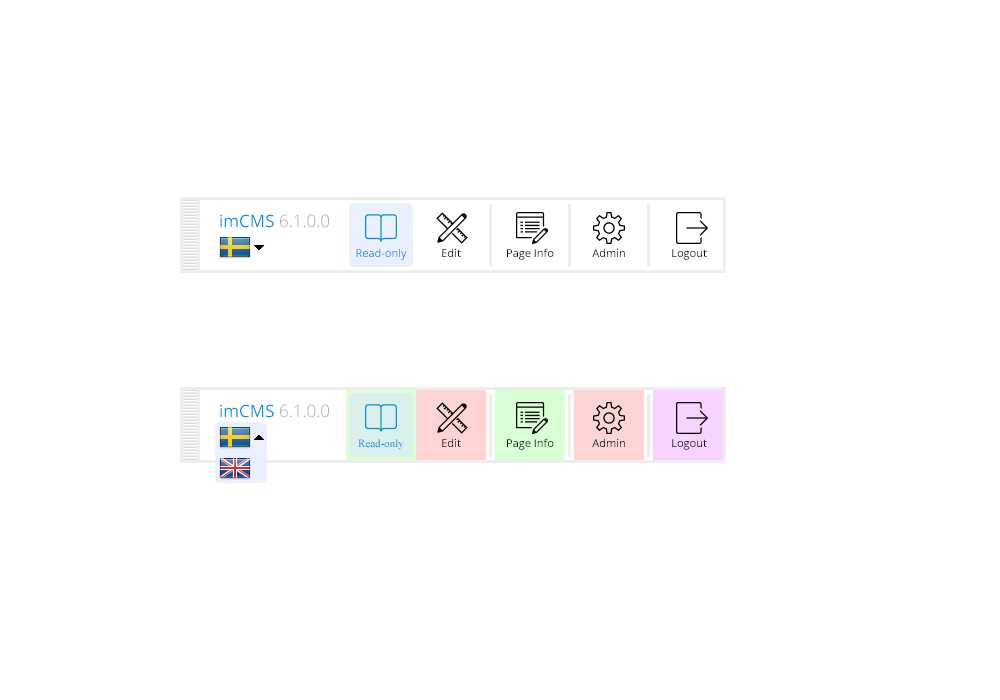
<style>
.page{position:relative;width:1000px;height:700px;background:#ffffff}
.page>*{position:absolute;margin:0}
.t1{font:17px "OpenSans-Light";color:#aaaaaa}
.t2{font:17px "OpenSans";color:#0091e1}
.t3{font:11px "OpenSans";color:#0091e1}
.t4{font:11px "OpenSans";color:#000000}
.t5{font:11px "TimesNewRomanPSMT";color:#0091e1}
</style>
<div class="page">
<p class="t1" style="left:220px;top:214px;width:109px;height:14px"><span class="t2">imCMS </span>6.1.0.0</p>
<p class="t3" style="left:356px;top:248px;width:51px;height:12px">Read-only</p>
<p class="t4" style="left:442px;top:248px;width:19px;height:9px">Edit</p>
<p class="t4" style="left:507px;top:248px;width:47px;height:12px">Page Info</p>
<p class="t4" style="left:592px;top:248px;width:33px;height:9px">Admin</p>
<p class="t4" style="left:672px;top:249px;width:35px;height:11px">Logout</p>
<p class="t1" style="left:220px;top:404px;width:109px;height:14px"><span class="t2">imCMS </span>6.1.0.0</p>
<p class="t4" style="left:442px;top:438px;width:19px;height:9px">Edit</p>
<p class="t4" style="left:507px;top:438px;width:47px;height:12px">Page Info</p>
<p class="t4" style="left:592px;top:438px;width:33px;height:9px">Admin</p>
<p class="t5" style="left:358px;top:439px;width:46px;height:11px">Read-only</p>
<p class="t4" style="left:672px;top:439px;width:35px;height:11px">Logout</p>
</div>
